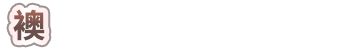
<style>
.page{position:relative;width:360px;height:50px;background:#ffffff}
.page>*{position:absolute;margin:0}
.t1{font:32px "SourceHanSansSC-Bold";font-weight:bold}
</style>
<div class="page">
<p class="t1" style="left:13px;top:9px;width:32px;height:32px">襖</p>
</div>
